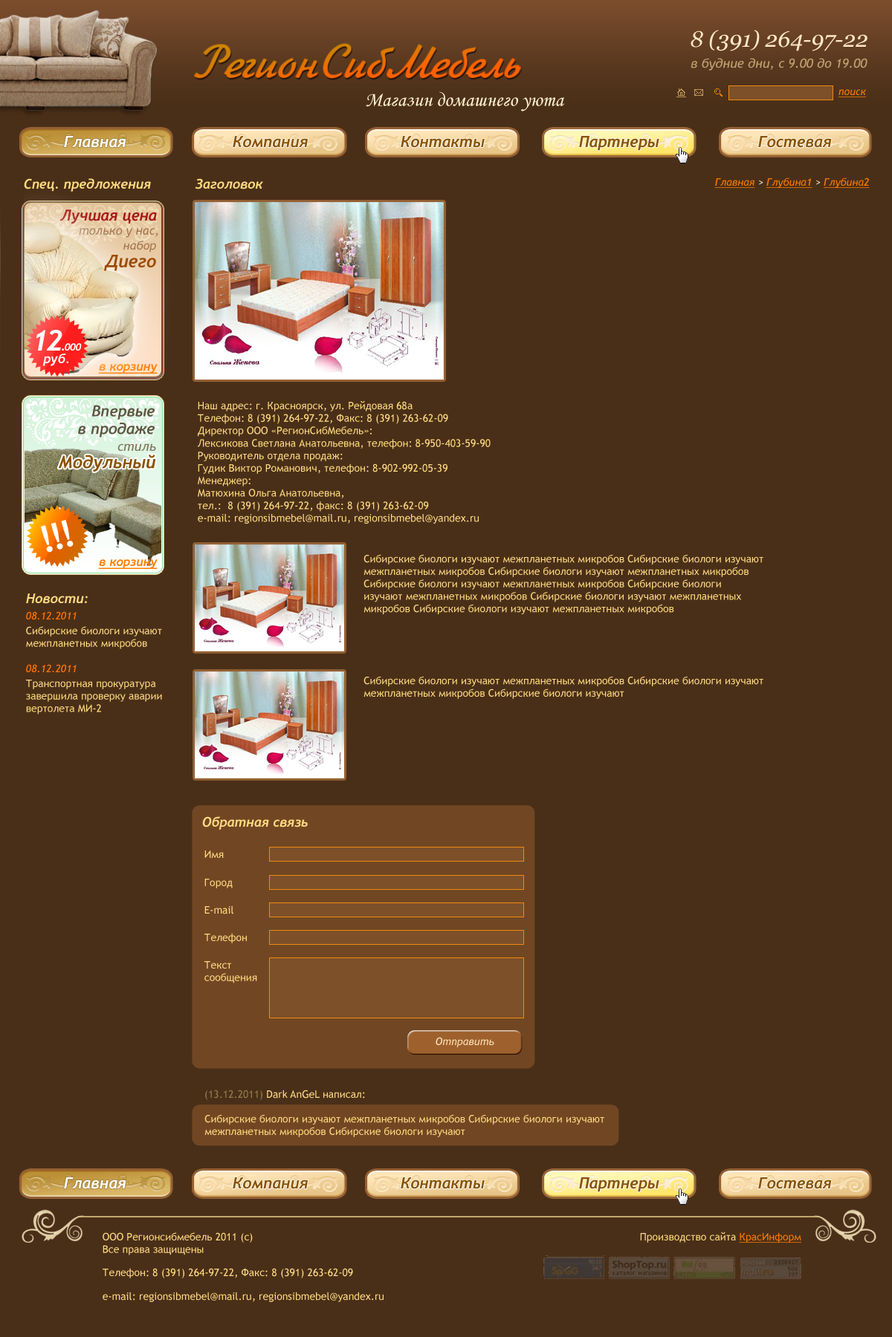
<style>
.page{position:relative;width:892px;height:1337px;background:#4a2f18}
.page>*{position:absolute;margin:0}
.t1{font:22.3px "Georgia-Italic";color:#ffe8c5}
.t2{font:12.8px "TrebuchetMS-Italic";color:#c1a271}
.t3{font:10.4px "TrebuchetMS-Italic";color:#ff7e00;text-decoration:underline}
.t4{font:20.2px "MonotypeCorsiva";color:#fff1ce}
.t5{font:15.6px "Trebuchet-BoldItalic";color:#ffffff}
.t6{font:15.6px "Trebuchet-BoldItalic";color:#8a5400}
.t7{font:13.4px "Trebuchet-BoldItalic";color:#ffdc81}
.t8{font:10.4px "TrebuchetMS-Italic";color:#fff1ce}
.t9{font:15.2px "Trebuchet-BoldItalic";color:#a71616}
.t10{font:12.2px "TrebuchetMS-Italic";color:#a1744f}
.t11{font:11.9px/23.6px "TrebuchetMS-Italic";color:#a37651}
.t12{font:17.4px/17.6px "Trebuchet-BoldItalic";color:#9c4c05}
.t13{font:13px/12.6px "Trebuchet-BoldItalic";color:#ffffff}
.t14{font:28.6px/12.6px "Trebuchet-BoldItalic";letter-spacing:-0.08em;color:#ffffff}
.t15{font:13.4px/12.6px "Trebuchet-BoldItalic";letter-spacing:-0.08em;color:#ffffff}
.t16{font:10px/12.6px "Trebuchet-BoldItalic";letter-spacing:-0.04em;color:#ffffff}
.t17{font:12.2px "Trebuchet-BoldItalic";color:#ff8813;text-decoration:underline}
.t18{font:10.4px "TrebuchetMS";color:#ffdc81}
.t19{font:15.2px/17.6px "Trebuchet-BoldItalic";color:#5e5642}
.t20{font:13px "TrebuchetMS-Italic";color:#807558}
.t21{font:17.4px "Trebuchet-BoldItalic";color:#8a5400}
.t22{font:36.7px "TrebuchetMS-Bold";letter-spacing:-0.08em;color:#ffffff}
.t23{font:12.2px "Trebuchet-BoldItalic";color:#ff7e00;text-decoration:underline}
.t24{font:10.4px "TrebuchetMS-Italic";color:#ff7200}
.t25{font:10.4px "TrebuchetMS-Italic";color:#ffe5b9}
.t26{font:10.4px "TrebuchetMS";color:#907d4b}
.t27{font:10.4px "TrebuchetMS";color:#ff7c00;text-decoration:underline}
</style>
<div class="page">
<p class="t1" style="left:690px;top:30px;width:177px;height:21px">8 (391) 264-97-22</p>
<p class="t2" style="left:690px;top:58px;width:177px;height:13px">в будние дни, с 9.00 до 19.00</p>
<p class="t3" style="left:837px;top:89px;width:29px;height:8px">поиск</p>
<p class="t4" style="left:366px;top:91px;width:199px;height:20px">Магазин домашнего уюта</p>
<p class="t5" style="left:64px;top:136px;width:62px;height:12px">Главная</p>
<p class="t6" style="left:233px;top:136px;width:75px;height:12px">Компания</p>
<p class="t6" style="left:400px;top:136px;width:84px;height:12px">Контакты</p>
<p class="t6" style="left:579px;top:136px;width:80px;height:15px">Партнеры</p>
<p class="t6" style="left:758px;top:136px;width:73px;height:12px">Гостевая</p>
<p class="t7" style="left:24px;top:178px;width:127px;height:14px">Спец. предложения</p>
<p class="t7" style="left:195px;top:178px;width:68px;height:11px">Заголовок</p>
<p class="t3" style="left:714px;top:178px;width:155px;height:10px">Главная<span class="t8"> &gt; </span>Глубина1<span class="t8"> &gt; </span>Глубина2</p>
<p class="t9" style="left:59px;top:210px;width:98px;height:14px">Лучшая цена</p>
<p class="t10" style="left:79px;top:228px;width:79px;height:10px">только у нас,</p>
<p class="t11" style="left:104px;top:241px;width:52px;height:30px;text-align:right">набор<br><span class="t12">Диего</span></p>
<p class="t13" style="left:36px;top:330px;width:46px;height:36px;text-align:center"><span class="t14">12</span><span class="t15">.</span><span class="t16">000<br></span>руб.</p>
<p class="t17" style="left:98px;top:364px;width:60px;height:10px">в корзину</p>
<p class="t18" style="left:198px;top:400px;width:292px;height:124px">Наш адрес: г. Красноярск, ул. Рейдовая 68а<br>Телефон: 8 (391) 264-97-22, Факс: 8 (391) 263-62-09<br>Директор ООО «РегионСибМебель»: <br>Лексикова Светлана Анатольевна, телефон: 8-950-403-59-90      <br>Руководитель отдела продаж:<br>Гудик Виктор Романович, телефон: 8-902-992-05-39      <br>Менеджер: <br>Матюхина Ольга Анатольевна,<br>тел.:  8 (391) 264-97-22, факс: 8 (391) 263-62-09<br>e-mail: regionsibmebel@mail.ru, regionsibmebel@yandex.ru</p>
<p class="t19" style="left:78px;top:405px;width:77px;height:33px;text-align:right">Впервые<br>в продаже</p>
<p class="t20" style="left:117px;top:444px;width:39px;height:7px">стиль</p>
<p class="t21" style="left:58px;top:455px;width:98px;height:17px">Модульный</p>
<p class="t22" style="left:41px;top:520px;width:33px;height:33px;rotate:-15deg">!!!</p>
<p class="t18" style="left:363px;top:554px;width:400px;height:60px">Сибирские биологи изучают межпланетных микробов Сибирские биологи изучают <br>межпланетных микробов Сибирские биологи изучают межпланетных микробов <br>Сибирские биологи изучают межпланетных микробов Сибирские биологи <br>изучают межпланетных микробов Сибирские биологи изучают межпланетных <br>микробов Сибирские биологи изучают межпланетных микробов</p>
<p class="t23" style="left:98px;top:559px;width:60px;height:10px">в корзину</p>
<p class="t7" style="left:26px;top:594px;width:62px;height:10px">Новости:</p>
<p class="t24" style="left:26px;top:611px;width:51px;height:9px">08.12.2011</p>
<p class="t18" style="left:26px;top:626px;width:136px;height:23px">Сибирские биологи изучают <br>межпланетных микробов</p>
<p class="t24" style="left:26px;top:664px;width:51px;height:8px">08.12.2011</p>
<p class="t18" style="left:363px;top:676px;width:400px;height:23px">Сибирские биологи изучают межпланетных микробов Сибирские биологи изучают <br>межпланетных микробов Сибирские биологи изучают</p>
<p class="t18" style="left:26px;top:680px;width:136px;height:35px">Транспортная прокуратура <br>завершила проверку аварии <br>вертолета МИ-2</p>
<p class="t7" style="left:202px;top:817px;width:106px;height:13px">Обратная связь</p>
<p class="t18" style="left:204px;top:851px;width:20px;height:7px">Имя</p>
<p class="t18" style="left:204px;top:879px;width:29px;height:10px">Город</p>
<p class="t18" style="left:204px;top:906px;width:29px;height:9px">E-mail</p>
<p class="t18" style="left:204px;top:933px;width:43px;height:11px">Телефон</p>
<p class="t18" style="left:204px;top:961px;width:53px;height:23px">Текст<br>сообщения</p>
<p class="t25" style="left:435px;top:1037px;width:59px;height:11px">Отправить</p>
<p class="t18" style="left:205px;top:1090px;width:160px;height:10px"><span class="t26">(13.12.2011)</span> Dark AnGeL написал:</p>
<p class="t18" style="left:204px;top:1115px;width:400px;height:23px">Сибирские биологи изучают межпланетных микробов Сибирские биологи изучают <br>межпланетных микробов Сибирские биологи изучают</p>
<p class="t5" style="left:64px;top:1178px;width:62px;height:12px">Главная</p>
<p class="t6" style="left:233px;top:1178px;width:75px;height:12px">Компания</p>
<p class="t6" style="left:400px;top:1178px;width:84px;height:12px">Контакты</p>
<p class="t6" style="left:579px;top:1178px;width:80px;height:15px">Партнеры</p>
<p class="t6" style="left:758px;top:1178px;width:73px;height:12px">Гостевая</p>
<p class="t18" style="left:103px;top:1233px;width:150px;height:23px">ООО Регионсибмебель 2011 (с)<br>Все права защищены</p>
<p class="t18" style="left:640px;top:1232px;width:161px;height:11px">Производство сайта <span class="t27">КрасИнформ</span></p>
<p class="t18" style="left:103px;top:1268px;width:250px;height:11px">Телефон: 8 (391) 264-97-22, Факс: 8 (391) 263-62-09</p>
<p class="t18" style="left:103px;top:1292px;width:280px;height:10px">e-mail: regionsibmebel@mail.ru, regionsibmebel@yandex.ru</p>
</div>
